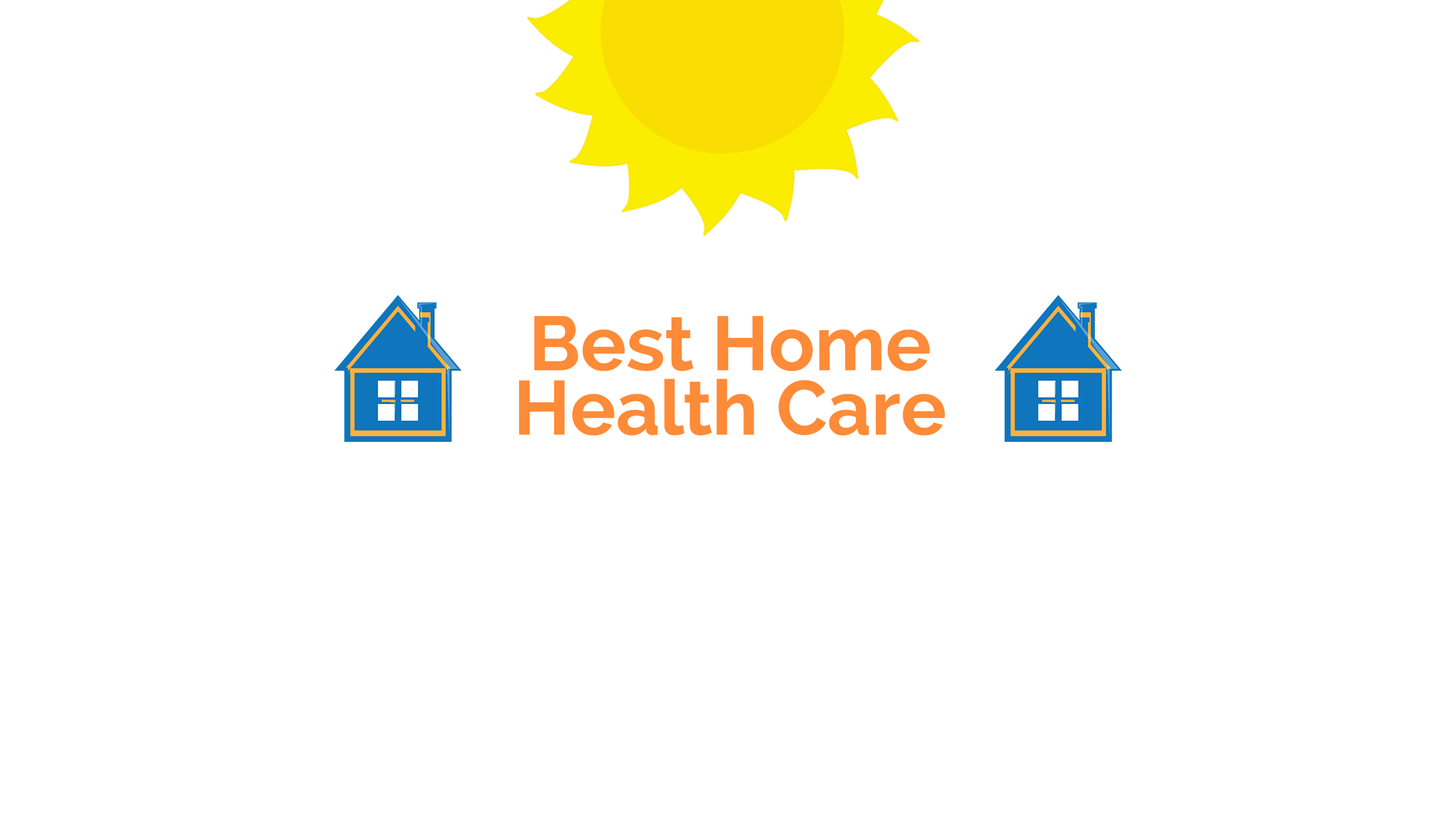
<style>
.page{position:relative;width:1446px;height:825px;background:#ffffff}
.page>*{position:absolute;margin:0}
.t1{font:76.1px/64.4px "Raleway-Bold";color:#fe8b38}
</style>
<div class="page">
<p class="t1" style="left:519px;top:316px;width:426px;height:119px;text-align:center">Best Home<br>Health Care</p>
</div>
